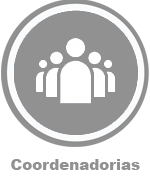
<style>
.page{position:relative;width:150px;height:184px;background:#ffffff}
.page>*{position:absolute;margin:0}
.t1{font:15px "Arial-Black";color:#919191}
</style>
<div class="page">
<p class="t1" style="left:11px;top:159px;width:129px;height:11px">Coordenadorias</p>
</div>
